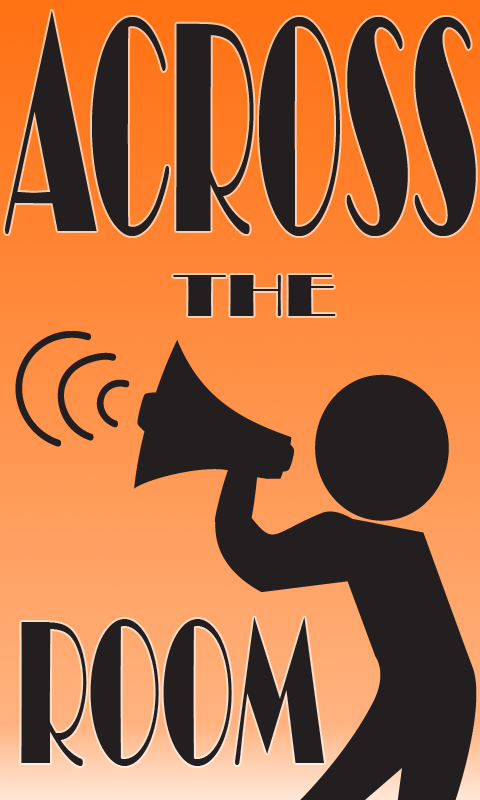
<style>
.page{position:relative;width:480px;height:800px;background:#231f20}
.page>*{position:absolute;margin:0}
.t1{font:311.2px "Broadway";color:#231f20;scale:0.37 1}
.t2{font:61.6px "Broadway";color:#231f20;scale:1.24 1}
.t3{font:212.4px "Broadway";color:#231f20;scale:0.45 1}
</style>
<div class="page">
<p class="t1" style="left:5px;top:10px;width:471px;height:226px">ACROSS</p>
<p class="t2" style="left:173px;top:275px;width:163px;height:41px">THE</p>
<p class="t3" style="left:21px;top:617px;width:303px;height:149px">ROOM</p>
</div>
